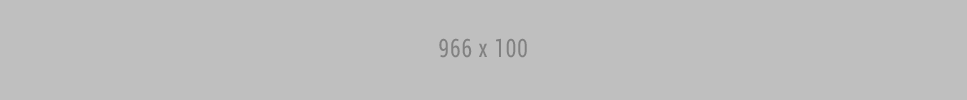
<style>
.page{position:relative;width:967px;height:100px;background:#bfbfbf}
.page>*{position:absolute;margin:0}
.t1{font:25px "Roboto-Condensed";letter-spacing:0.07em;color:#818181;scale:0.8 1}
</style>
<div class="page">
<p class="t1" style="left:439px;top:38px;width:88px;height:20px">966 x 100</p>
</div>
